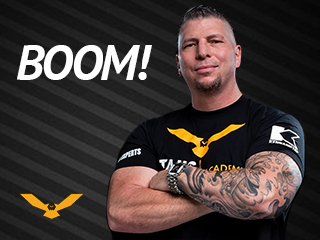
<style>
.page{position:relative;width:320px;height:240px}
.page>*{position:absolute;margin:0}
.t1{font:49.2px "PTSans-BoldItalic";letter-spacing:-0.05em;color:#ffffff}
</style>
<div class="page">
<p class="t1" style="left:17px;top:45px;width:135px;height:35px">BOOM!</p>
</div>
